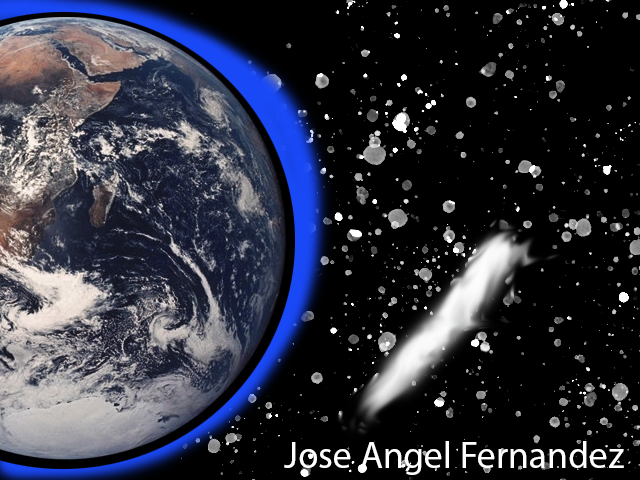
<style>
.page{position:relative;width:640px;height:480px;background:#000000}
.page>*{position:absolute;margin:0}
.t1{font:37.5px "MyriadPro-Regular";color:#ffffff}
</style>
<div class="page">
<p class="t1" style="left:284px;top:441px;width:340px;height:34px">Jose Angel Fernandez</p>
</div>
